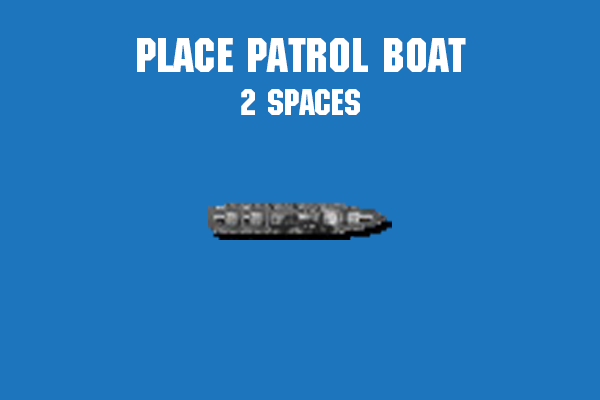
<style>
.page{position:relative;width:600px;height:400px;background:#1d75bd}
.page>*{position:absolute;margin:0}
.t1{font:48px "MachineStd";color:#ffffff}
.t2{font:36px "MachineStd";color:#ffffff}
</style>
<div class="page">
<p class="t1" style="left:137px;top:38px;width:329px;height:77px;text-align:center">Place PATROL BOAt<br><span class="t2">2 spaces</span></p>
</div>
